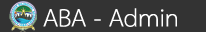
<style>
.page{position:relative;width:206px;height:32px;background:#333333}
.page>*{position:absolute;margin:0}
.t1{font:36px "THSarabunPSK";color:#ffffff}
</style>
<div class="page">
<p class="t1" style="left:43px;top:8px;width:134px;height:19px">ABA - Admin</p>
</div>
